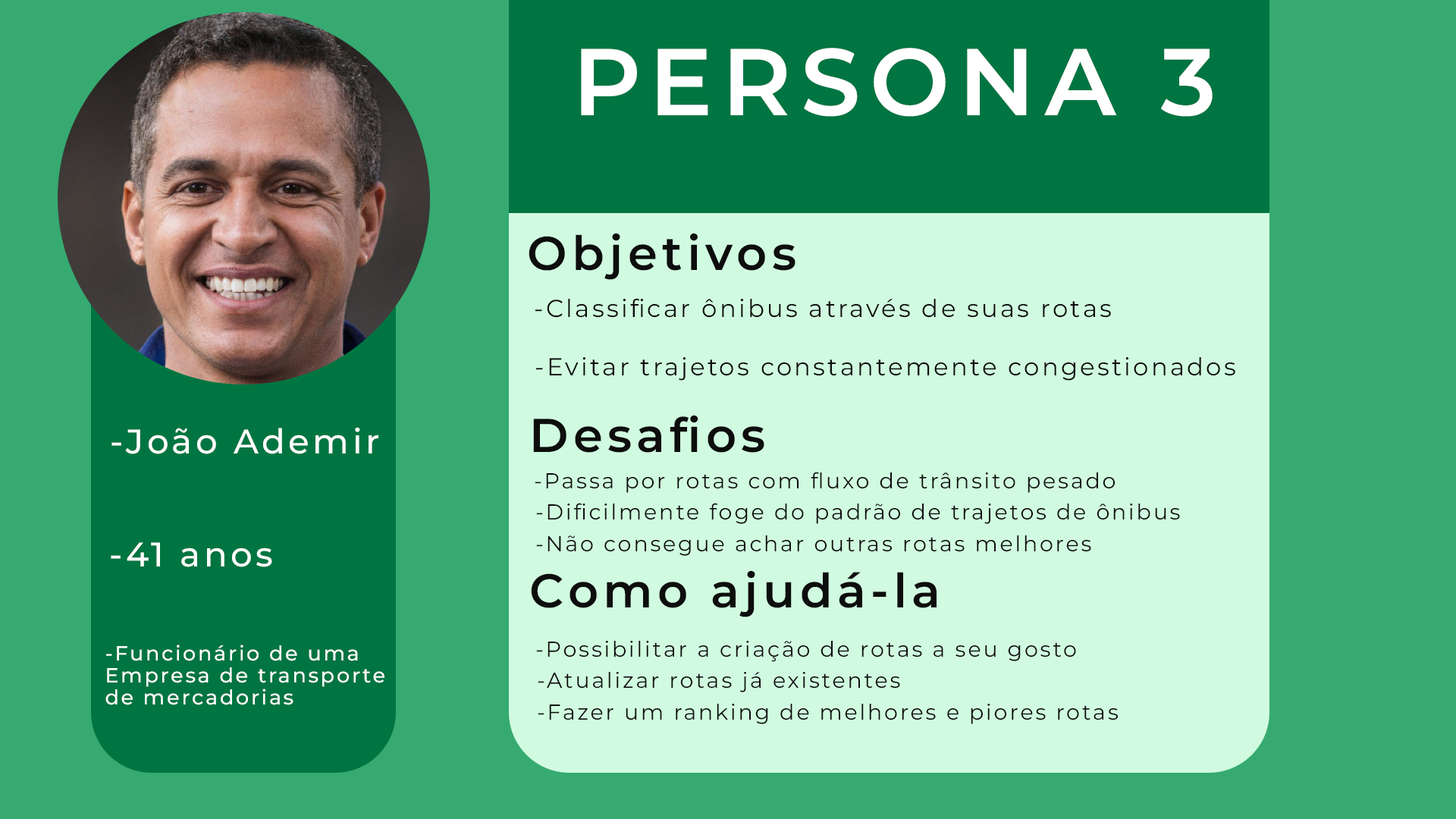
<style>
.page{position:relative;width:1456px;height:819px;background:#36aa71}
.page>*{position:absolute;margin:0}
.t1{font:94.6px "MontserratRoman-SemiBold";letter-spacing:0.1em;color:#ffffff}
.t2{font:47.3px "MontserratRoman-SemiBold";letter-spacing:0.1em;color:#0d0d0d}
.t3{font:24.5px "MontserratRoman-Regular";letter-spacing:0.1em;color:#0d0d0d}
.t4{font:34.2px "MontserratRoman-Medium";letter-spacing:0.1em;color:#ffffff}
.t5{font:21.6px "MontserratRoman-Regular";letter-spacing:0.1em;color:#0d0d0d}
.t6{font:20.5px/22.1px "MontserratRoman-Medium";letter-spacing:0.1em;color:#ffffff}
</style>
<div class="page">
<p class="t1" style="left:581px;top:48px;width:632px;height:69px">PERSONA 3</p>
<p class="t2" style="left:529px;top:233px;width:266px;height:47px">Objetivos</p>
<p class="t3" style="left:535px;top:298px;width:576px;height:20px">-Classificar ônibus através de suas rotas</p>
<p class="t3" style="left:536px;top:357px;width:699px;height:24px">-Evitar trajetos constantemente congestionados</p>
<p class="t2" style="left:533px;top:415px;width:231px;height:38px">Desafios</p>
<p class="t4" style="left:111px;top:427px;width:267px;height:27px">-João Ademir</p>
<p class="t5" style="left:535px;top:472px;width:580px;height:21px">-Passa por rotas com fluxo de trânsito pesado</p>
<p class="t5" style="left:536px;top:503px;width:644px;height:21px">-Dificilmente foge do padrão de trajetos de ônibus</p>
<p class="t4" style="left:111px;top:542px;width:161px;height:25px">-41 anos</p>
<p class="t5" style="left:536px;top:535px;width:555px;height:21px">-Não consegue achar outras rotas melhores</p>
<p class="t2" style="left:531px;top:570px;width:406px;height:47px">Como ajudá-la</p>
<p class="t5" style="left:536px;top:641px;width:540px;height:21px">-Possibilitar a criação de rotas a seu gosto</p>
<p class="t6" style="left:105px;top:645px;width:279px;height:60px">-Funcionário de uma<br>Empresa de transporte<br>de mercadorias</p>
<p class="t5" style="left:538px;top:672px;width:362px;height:20px">-Atualizar rotas já existentes</p>
<p class="t5" style="left:538px;top:704px;width:580px;height:20px">-Fazer um ranking de melhores e piores rotas</p>
</div>
